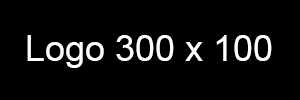
<style>
.page{position:relative;width:300px;height:100px;background:#000000}
.page>*{position:absolute;margin:0}
.t1{font:36px "ArialMT";color:#ffffff}
</style>
<div class="page">
<p class="t1" style="left:27px;top:35px;width:245px;height:33px">Logo 300 x 100</p>
</div>
